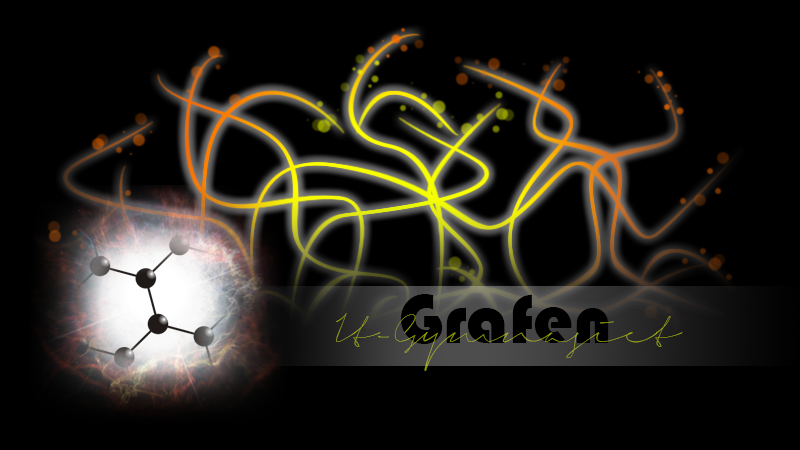
<style>
.page{position:relative;width:800px;height:450px;background:#000000}
.page>*{position:absolute;margin:0}
.t1{font:72px "Bauhaus93";color:#000000}
.t2{font:36px "SignericaThin"}
</style>
<div class="page">
<p class="t1" style="left:400px;top:294px;width:209px;height:50px">Grafen</p>
<p class="t2" style="left:336px;top:313px;width:347px;height:58px">It-Gymnasiet</p>
</div>
